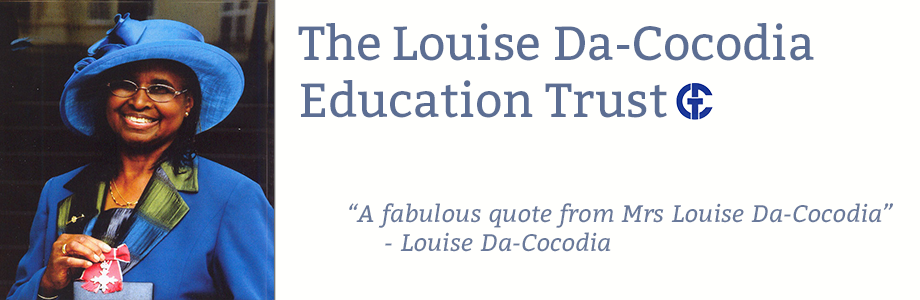
<style>
.page{position:relative;width:920px;height:300px;background:#fffffd}
.page>*{position:absolute;margin:0}
.t1{font:48px "Bitter-Regular";color:#5c6e93}
.t2{font:24px "Bitter-Italic";color:#69799a}
</style>
<div class="page">
<p class="t1" style="left:298px;top:23px;width:516px;height:95px">The Louise Da-Cocodia<br>Education Trust</p>
<p class="t2" style="left:349px;top:203px;width:544px;height:49px">“A fabulous quote from Mrs Louise Da-Cocodia”<br> - Louise Da-Cocodia</p>
</div>
